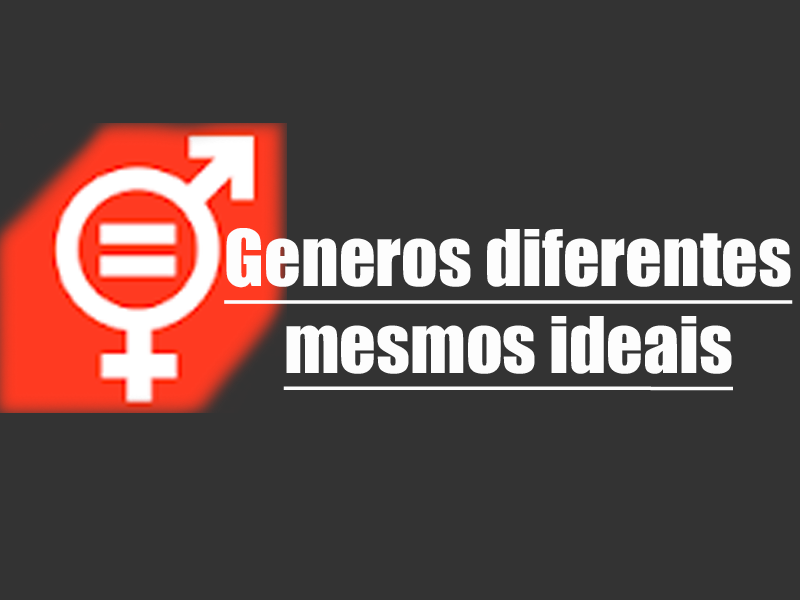
<style>
.page{position:relative;width:800px;height:600px;background:#333333}
.page>*{position:absolute;margin:0}
.t1{font:72px "Impact";color:#fcfcfc;text-decoration:underline}
</style>
<div class="page">
<p class="t1" style="left:224px;top:228px;width:569px;height:163px;text-align:center">Generos diferentes mesmos ideais</p>
</div>
